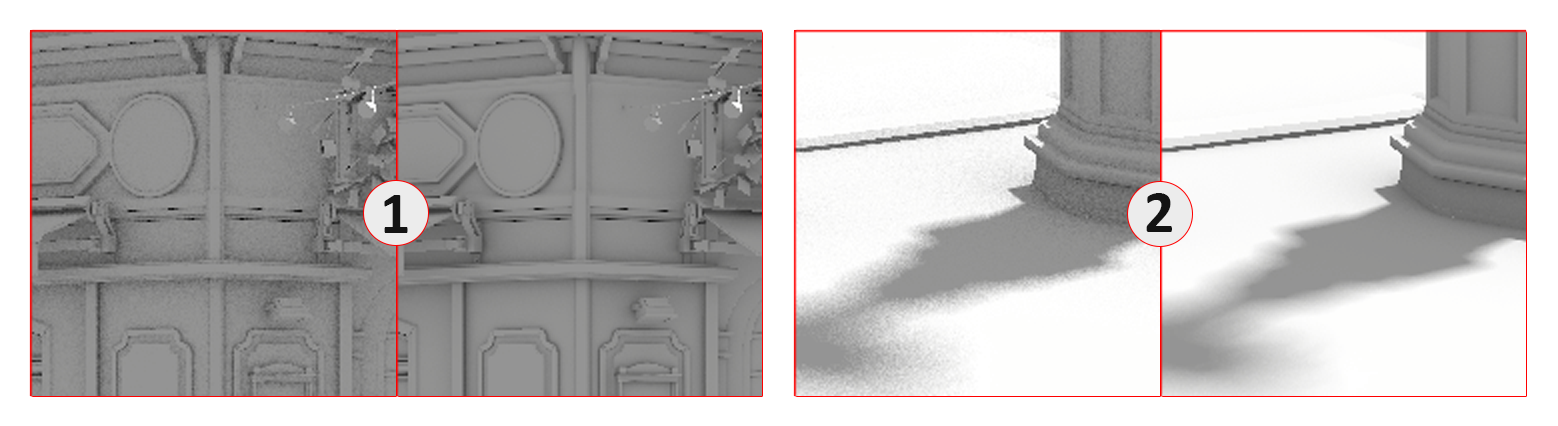
<style>
.page{position:relative;width:1558px;height:426px}
.page>*{position:absolute;margin:0}
.t1{font:60px "Calibri-Bold";color:#131313}
</style>
<div class="page">
<p class="t1" style="left:384px;top:195px;width:24px;height:38px">1</p>
<p class="t1" style="left:1146px;top:193px;width:26px;height:39px">2</p>
</div>
